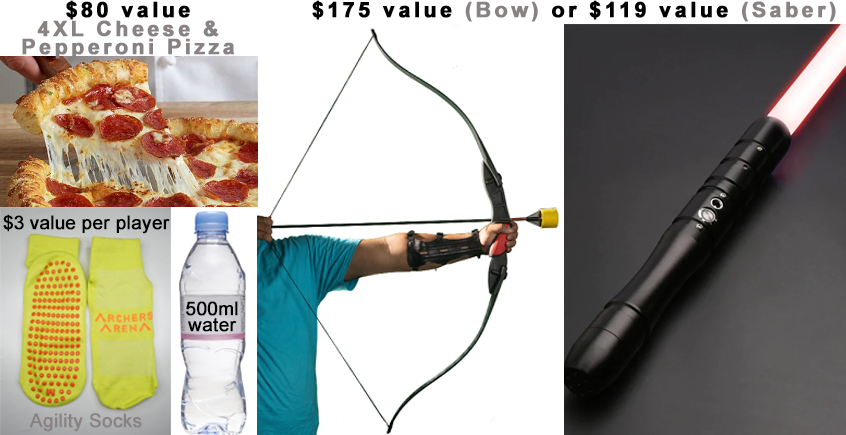
<style>
.page{position:relative;width:846px;height:435px;background:#ffffff}
.page>*{position:absolute;margin:0}
.t1{font:21.3px/18.7px "Arial-BoldMT";letter-spacing:0.14em;color:#888282;font-weight:bold}
.t2{font:21.3px/32px "Arial-BoldMT";letter-spacing:0.14em;color:#000000;font-weight:bold}
.t3{font:21.3px "Arial-BoldMT";letter-spacing:0.14em;color:#000000;font-weight:bold}
.t4{font:21.3px "Arial-BoldMT";letter-spacing:0.14em;color:#888282;font-weight:bold}
.t5{font:18.7px "ArialMT";color:#000000;font-weight:bold}
.t6{font:18.7px "ArialMT";letter-spacing:-0.01em;color:#000000;font-weight:bold}
.t7{font:18.7px/16px "ArialMT";color:#000000;font-weight:bold}
.t8{font:18.7px "ArialMT";color:#888282;font-weight:bold}
</style>
<div class="page">
<p class="t1" style="left:22px;top:0px;width:213px;height:59px;text-align:center"><span class="t2">$80 value<br></span>4XL Cheese &amp;<br>Pepperoni Pizza</p>
<p class="t3" style="left:312px;top:0px;width:524px;height:22px">$175 value <span class="t4">(Bow)</span> or $119 value <span class="t4">(Saber)</span></p>
<p class="t5" style="left:3px;top:214px;width:167px;height:20px"><span class="t6">$3 value </span>per player</p>
<p class="t7" style="left:186px;top:301px;width:52px;height:31px;text-align:center">500ml<br>water</p>
<p class="t8" style="left:29px;top:413px;width:113px;height:19px">Agility Socks</p>
</div>
